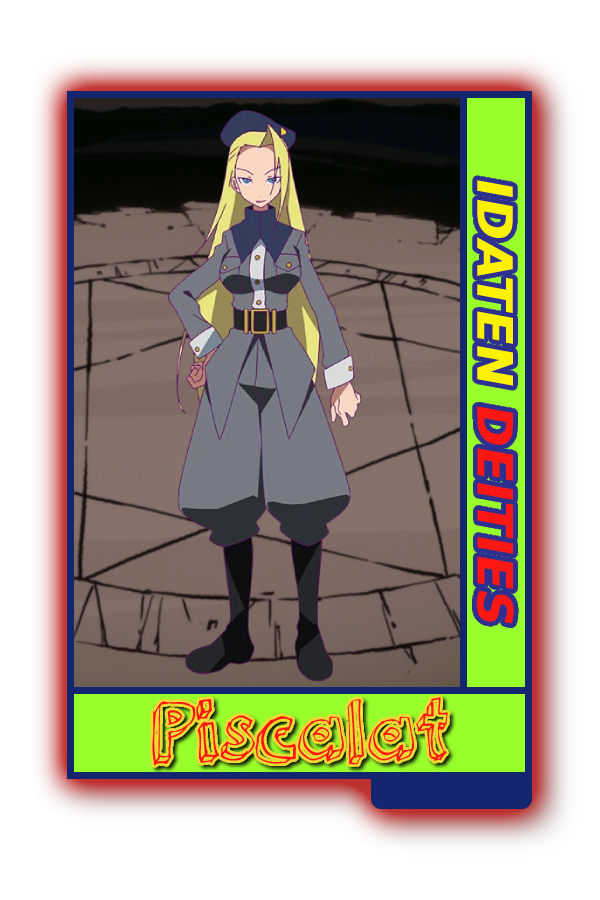
<style>
.page{position:relative;width:600px;height:900px;background:#ffffff}
.page>*{position:absolute;margin:0}
.t1{font:48.8px "MADETOMMY-Bold";color:#ff1713;font-weight:bold;font-style:italic}
.t2{font:48.8px "MADETOMMY-Bold";color:#fdf103;font-weight:bold;font-style:italic}
.t3{font:75px "3dumb";color:#ff1611}
</style>
<div class="page">
<p class="t1" style="left:476px;top:180px;width:38px;height:444px;rotate:90deg"><span class="t2">IDATEN </span>DEITIES</p>
<p class="t3" style="left:152px;top:697px;width:296px;height:69px">Piscalat</p>
</div>
